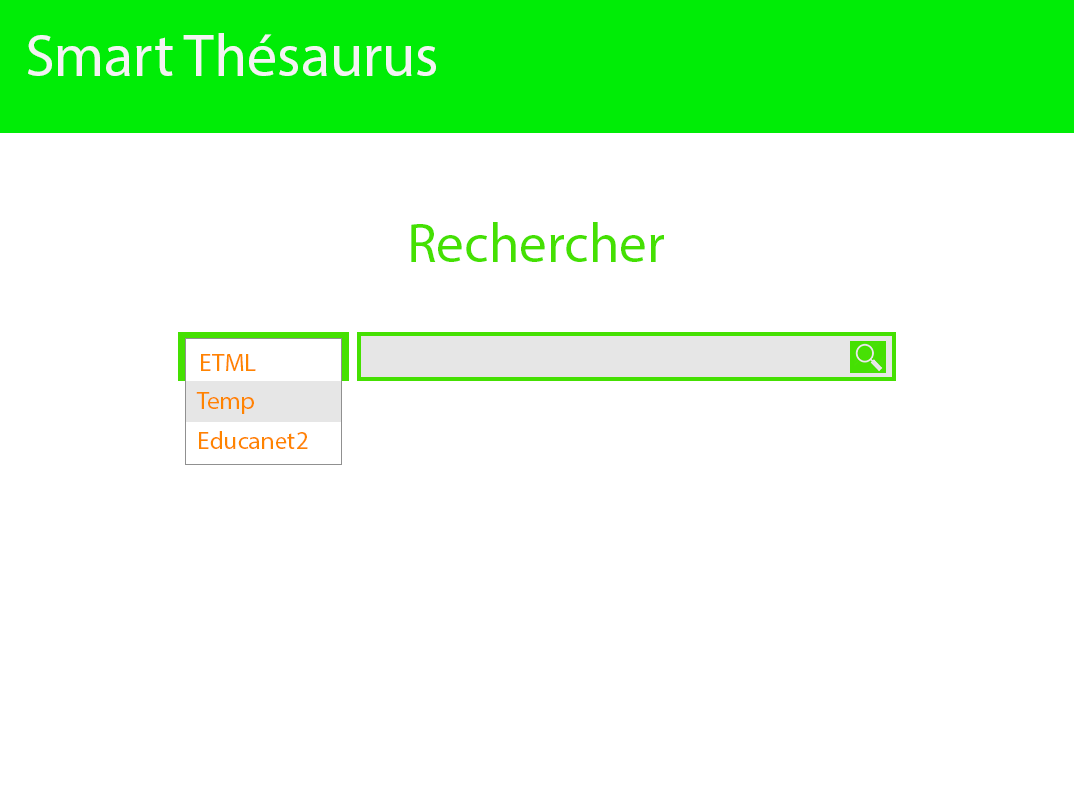
<style>
.page{position:relative;width:1074px;height:786px;background:#ffffff}
.page>*{position:absolute;margin:0}
.t1{font:60px "MyriadPro-Regular";color:#f4f3f3}
.t2{font:55px "MyriadPro-Regular";color:#45e002}
.t3{font:25px "MyriadPro-Regular";color:#ff8400}
</style>
<div class="page">
<p class="t1" style="left:28px;top:33px;width:408px;height:43px">Smart Thésaurus</p>
<p class="t2" style="left:411px;top:222px;width:253px;height:40px">Rechercher</p>
<p class="t3" style="left:201px;top:354px;width:55px;height:17px">ETML</p>
<p class="t3" style="left:196px;top:392px;width:58px;height:22px">Temp</p>
<p class="t3" style="left:199px;top:431px;width:109px;height:18px">Educanet2</p>
</div>
